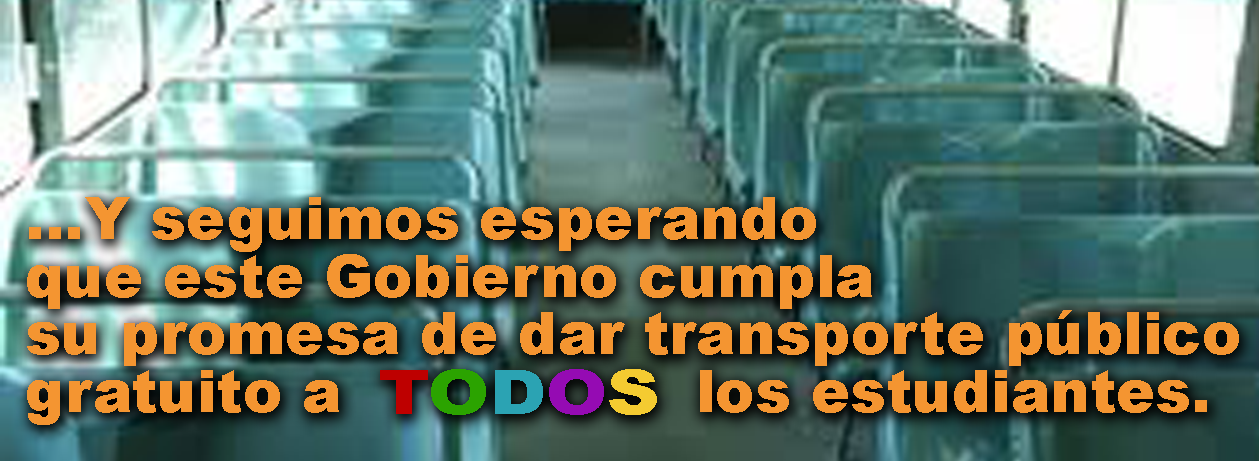
<style>
.page{position:relative;width:1259px;height:461px}
.page>*{position:absolute;margin:0}
.t1{font:59.1px/57.7px "Arial-Black";color:#f49531}
.t2{font:62.5px "Arial-Black";color:#be0000;scale:1.17 1}
.t3{font:62.5px "Arial-Black";color:#2ba300;scale:1.17 1}
.t4{font:62.5px "Arial-Black";color:#2ba3b3;scale:1.17 1}
.t5{font:62.5px "Arial-Black";color:#950bb3;scale:1.17 1}
.t6{font:62.5px "Arial-Black";color:#f4cb31;scale:1.17 1}
</style>
<div class="page">
<p class="t1" style="left:27px;top:197px;width:1212px;height:228px">…Y seguimos esperando<br>que este Gobierno cumpla<br>su promesa de dar transporte público<br>gratuito a                  los estudiantes.</p>
<p class="t2" style="left:380px;top:369px;width:277px;height:46px">T<span class="t3">O</span><span class="t4">D</span><span class="t5">O</span><span class="t6">S</span></p>
</div>
